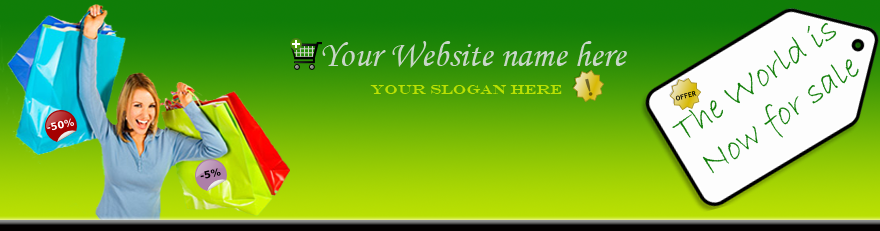
<style>
.page{position:relative;width:880px;height:231px}
.page>*{position:absolute;margin:0}
.t1{font:36px "BradleyHandITC";color:#107d07}
.t2{font:36px "MonotypeCorsiva";color:#c8d6c7}
.t3{font:14px "EngraversMT";color:#bae003}
</style>
<div class="page">
<p class="t1" style="left:672px;top:23px;width:187px;height:151px;text-align:center;rotate:-35deg">The World is<br>Now for sale</p>
<p class="t2" style="left:322px;top:41px;width:305px;height:27px">Your Website name here</p>
<p class="t3" style="left:370px;top:85px;width:192px;height:9px">Your slogan here</p>
</div>
